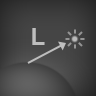
<style>
.page{position:relative;width:96px;height:96px}
.page>*{position:absolute;margin:0}
.t1{font:24px "Arial-BoldMT";color:#bebebe}
</style>
<div class="page">
<p class="t1" style="left:32px;top:28px;width:13px;height:17px">L</p>
</div>
